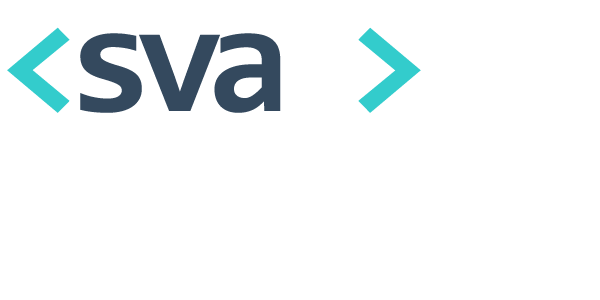
<style>
.page{position:relative;width:600px;height:300px;background:#ffffff}
.page>*{position:absolute;margin:0}
.t1{font:153px "Consolas-Bold";letter-spacing:-0.1em;color:#34495e}
.t2{font:153px "Consolas-Bold";letter-spacing:-0.1em;color:#33cccc}
.t3{font:153px "Consolas-Bold";letter-spacing:-0.1em;color:#ffffff}
</style>
<div class="page">
<p class="t1" style="left:7px;top:5px;width:414px;height:122px"><span class="t2">&lt;</span>sva<span class="t3">/</span><span class="t2">&gt;</span></p>
</div>
